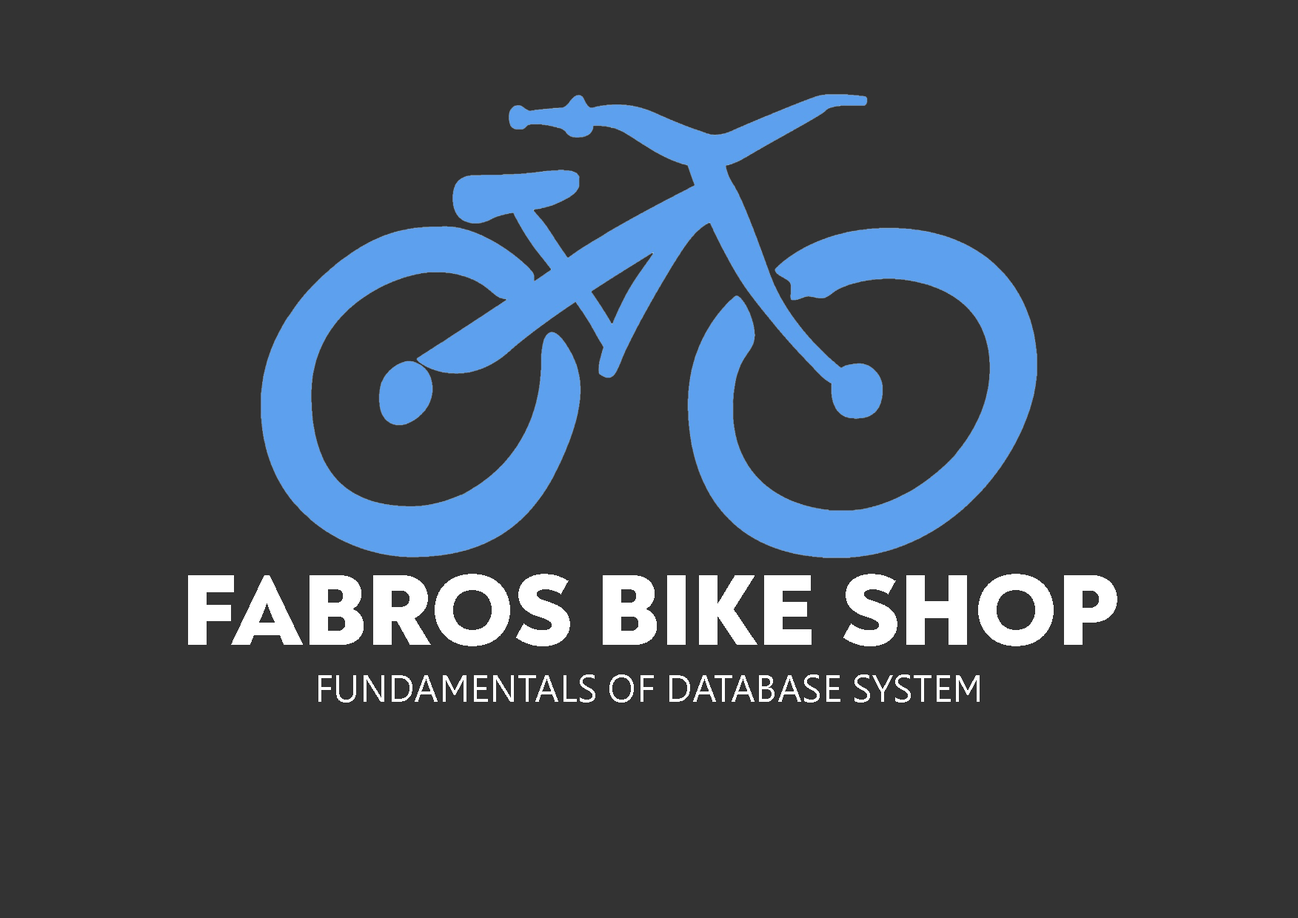
<style>
.page{position:relative;width:1298px;height:918px;background:#333333}
.page>*{position:absolute;margin:0}
.t1{font:102.9px "NoahHead-Heavy";color:#ffffff}
.t2{font:38.1px "Leelawadee";color:#ffffff}
</style>
<div class="page">
<p class="t1" style="left:188px;top:574px;width:930px;height:73px">FABROS BIKE SHOP</p>
<p class="t2" style="left:318px;top:675px;width:662px;height:28px">FUNDAMENTALS OF DATABASE SYSTEM</p>
</div>
